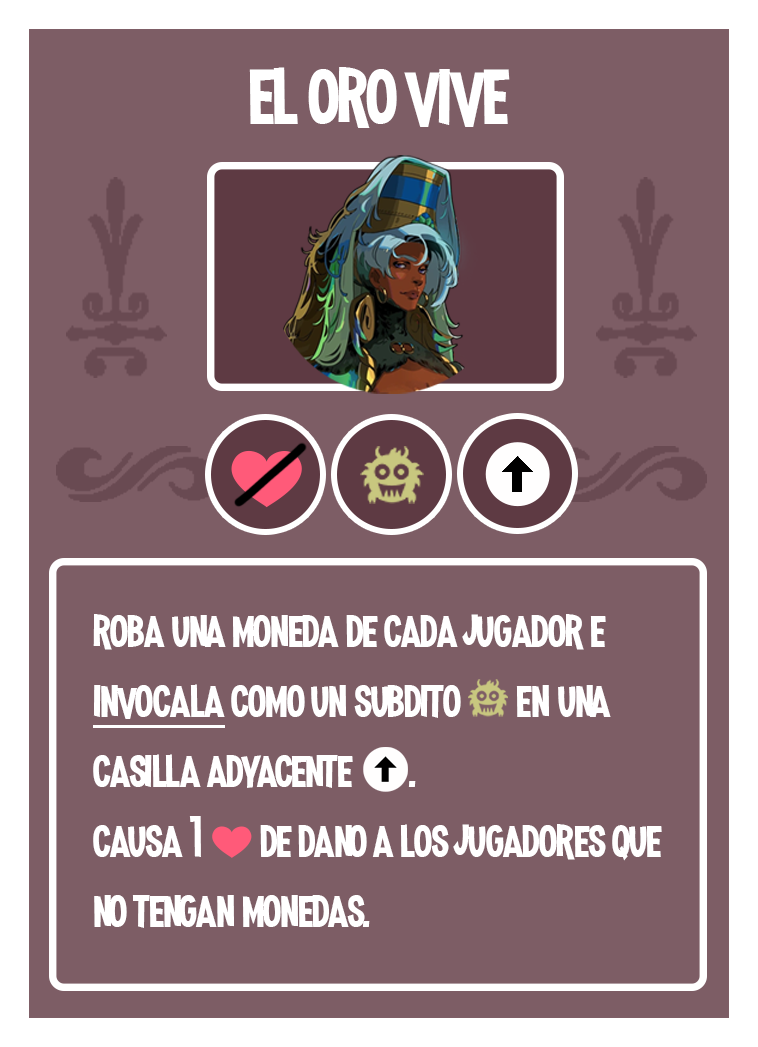
<style>
.page{position:relative;width:758px;height:1047px;background:#7d5d65}
.page>*{position:absolute;margin:0}
.t1{font:100px "MadnessHyperactive";color:#ffffff}
.t2{font:58.3px "MadnessHyperactive";color:#ffffff}
.t3{font:41.7px "EmojiOneColor";color:#ffffff}
</style>
<div class="page">
<p class="t1" style="left:249px;top:67px;width:261px;height:61px">el oro vive</p>
<p class="t2" style="left:93px;top:614px;width:569px;height:314px">roba una moneda de cada jugador e invocala como un subdito       en una casilla adyacente       .<br>causa 1 <span class="t3">❤️ </span>de dano a los jugadores que no tengan monedas.</p>
</div>
